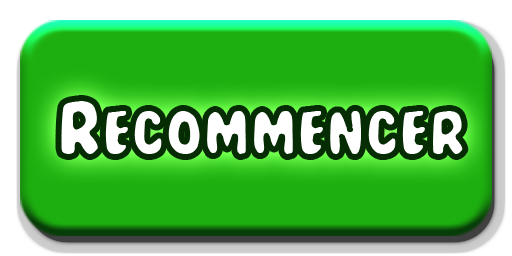
<style>
.page{position:relative;width:512px;height:256px;background:#1daf0f}
.page>*{position:absolute;margin:0}
.t1{font:63.3px "BubbleGum";letter-spacing:-0.035em}
.t2{font:76px "BubbleGum";letter-spacing:-0.035em}
</style>
<div class="page">
<p class="t1" style="left:58px;top:98px;width:408px;height:59px"><span class="t2">R</span>ecommencer</p>
</div>
